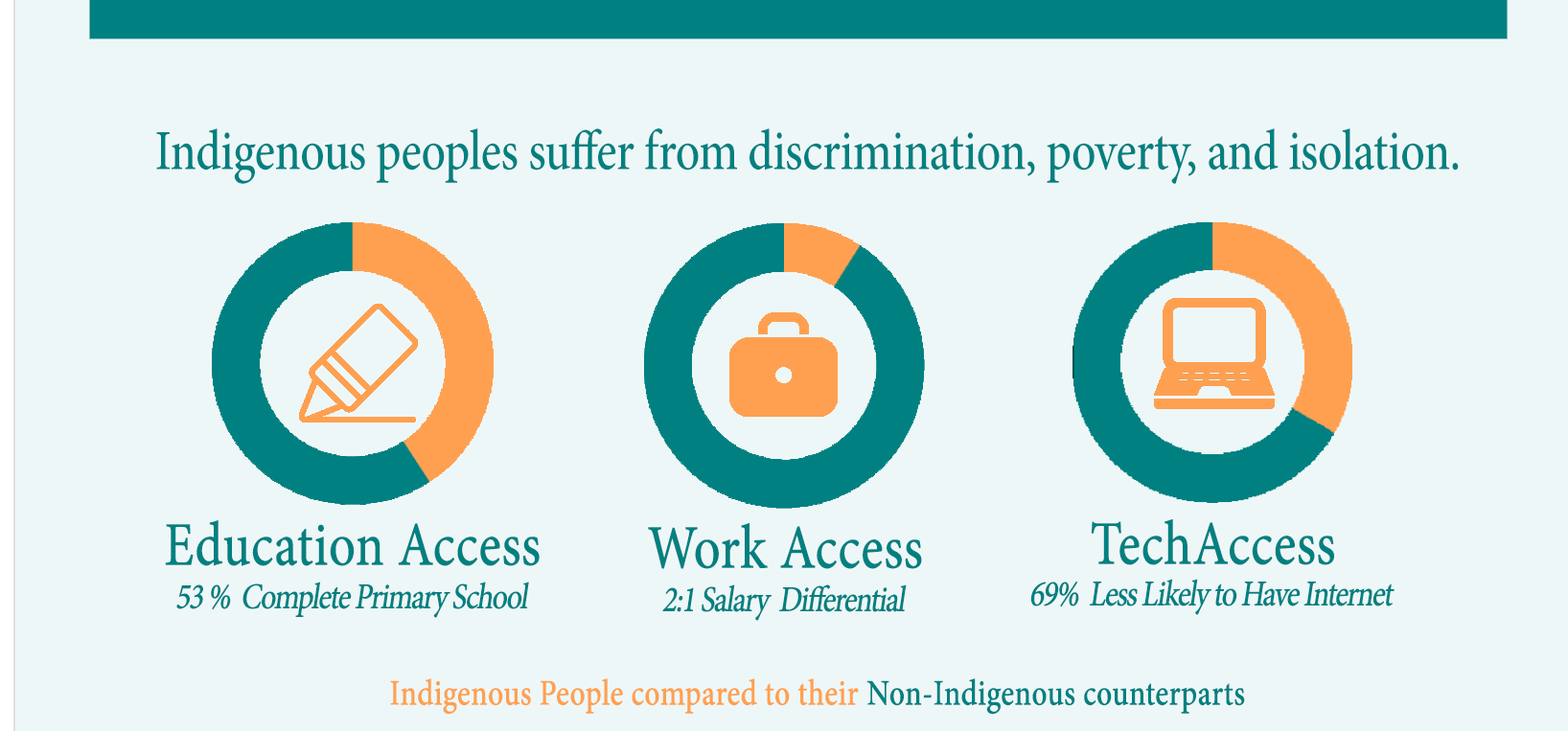
<style>
.page{position:relative;width:1568px;height:731px;background:#eef7f8}
.page>*{position:absolute;margin:0}
.t1{font:56.9px "MinionPro-Medium";letter-spacing:-0.01em;color:#008080;scale:0.84 1}
.t2{font:62.1px "MinionPro-Regular";letter-spacing:-0.01em;color:#008080;font-weight:bold;scale:0.84 1}
.t3{font:36.2px "MinionPro-Regular";letter-spacing:-0.07em;color:#008080;font-weight:bold;font-style:italic;scale:0.84 1}
.t4{font:36.2px "MinionPro-Medium";letter-spacing:-0.01em;color:#ffa051;font-weight:bold;scale:0.84 1}
.t5{font:36.2px "MinionPro-Medium";letter-spacing:-0.01em;color:#008080;font-weight:bold;scale:0.84 1}
</style>
<div class="page">
<p class="t1" style="left:156px;top:128px;width:1303px;height:56px">Indigenous peoples suffer from discrimination, poverty, and isolation.</p>
<p class="t2" style="left:165px;top:520px;width:375px;height:46px">Education Access</p>
<p class="t2" style="left:1091px;top:519px;width:243px;height:46px">TechAccess</p>
<p class="t2" style="left:648px;top:523px;width:274px;height:46px">Work Access</p>
<p class="t3" style="left:1030px;top:579px;width:365px;height:36px">69%  Less Likely to Have Internet</p>
<p class="t3" style="left:662px;top:585px;width:245px;height:36px">2:1 Salary  Differential</p>
<p class="t4" style="left:390px;top:679px;width:469px;height:36px">Indigenous People compared to their</p>
<p class="t5" style="left:866px;top:679px;width:379px;height:36px">Non-Indigenous counterparts</p>
</div>
